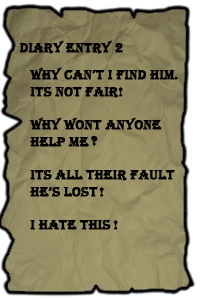
<style>
.page{position:relative;width:200px;height:300px}
.page>*{position:absolute;margin:0}
.t1{font:13.9px "Algerian";color:#000000;font-weight:bold}
</style>
<div class="page">
<p class="t1" style="left:19px;top:40px;width:104px;height:14px">Diary Entry 2</p>
<p class="t1" style="left:29px;top:67px;width:146px;height:163px;text-align:right">why can’t i find him<br>its not fair<br><br>why wont anyone help me<br><br>its all their fault he’s lost<br><br>i hate this</p>
<p class="t1" style="left:174px;top:77px;width:4px;height:3px">.</p>
<p class="t1" style="left:118px;top:87px;width:5px;height:10px">!</p>
<p class="t1" style="left:91px;top:136px;width:7px;height:10px">?</p>
<p class="t1" style="left:99px;top:187px;width:5px;height:10px">!</p>
<p class="t1" style="left:113px;top:220px;width:5px;height:10px">!</p>
</div>
